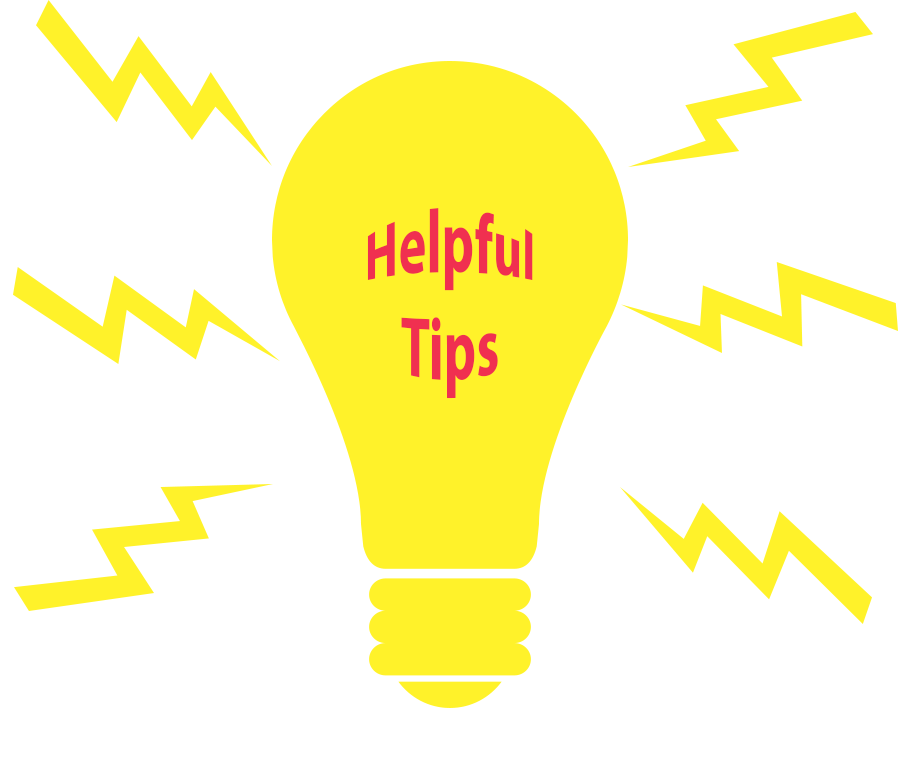
<style>
.page{position:relative;width:900px;height:768px;background:#ffffff}
.page>*{position:absolute;margin:0}
.t1{font:12px "MyriadPro-Bold";color:#f03050}
</style>
<div class="page">
<p class="t1" style="left:367px;top:208px;width:166px;height:191px;text-align:center">Helpful Tips</p>
</div>
